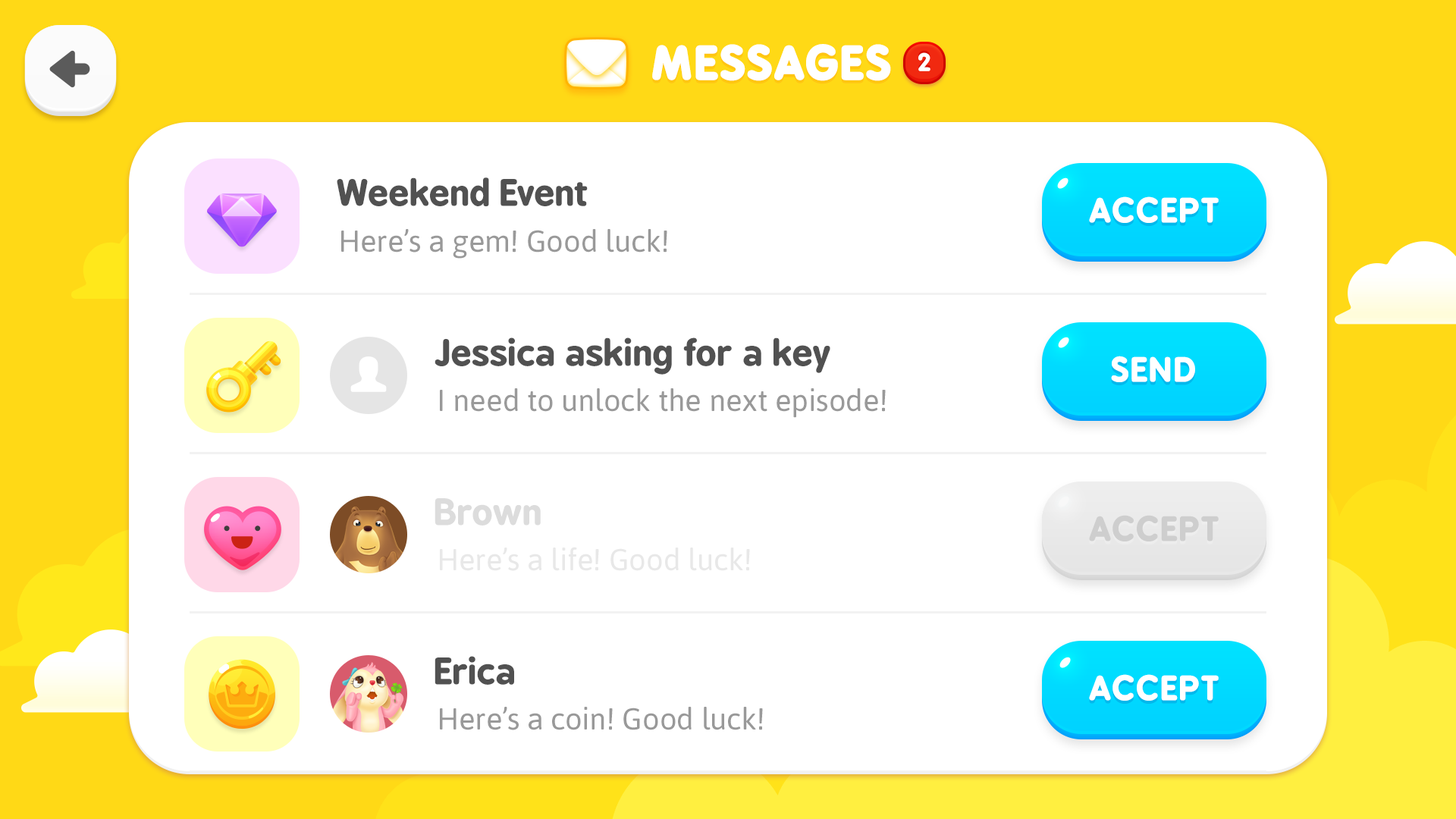
<style>
.page{position:relative;width:1456px;height:819px;background:#ffffff}
.page>*{position:absolute;margin:0}
.t1{font:43.1px "BPreplay-Bold";color:#ffffff;text-transform:uppercase;font-weight:bold;scale:1.05 1}
.t2{font:23.8px "BPreplay-Bold";letter-spacing:-0.1em;color:#ffffff;scale:1.06 1}
.t3{font:34.6px "BPreplay-Bold";letter-spacing:-0.01em;color:#515151;scale:1.05 1}
.t4{font:31.7px "BPreplay-Bold";color:#ffffff;text-transform:uppercase;font-weight:bold;scale:1.05 1}
.t5{font:30.3px "Asap-Regular";color:#999999}
.t6{font:34.6px "BPreplay-Bold";letter-spacing:-0.01em;color:#dcdcdc;scale:1.05 1}
.t7{font:31.7px "BPreplay-Bold";color:#cecece;text-transform:uppercase;font-weight:bold;scale:1.05 1}
.t8{font:30.3px "Asap-Regular";color:#e8e8e8}
</style>
<div class="page">
<p class="t1" style="left:652px;top:44px;width:239px;height:37px">Messages</p>
<p class="t2" style="left:918px;top:52px;width:12px;height:19px">2</p>
<p class="t3" style="left:337px;top:177px;width:251px;height:29px">Weekend Event</p>
<p class="t4" style="left:1089px;top:196px;width:130px;height:27px">Accept</p>
<p class="t5" style="left:341px;top:229px;width:326px;height:30px">Here’s a gem! Good luck!</p>
<p class="t3" style="left:435px;top:337px;width:395px;height:38px">Jessica asking for a key</p>
<p class="t4" style="left:1111px;top:356px;width:84px;height:26px">Send</p>
<p class="t5" style="left:440px;top:388px;width:446px;height:30px">I need to unlock the next episode!</p>
<p class="t6" style="left:435px;top:498px;width:106px;height:28px">Brown</p>
<p class="t7" style="left:1089px;top:515px;width:130px;height:26px">Accept</p>
<p class="t8" style="left:440px;top:547px;width:310px;height:24px">Here’s a life! Good luck!</p>
<p class="t3" style="left:435px;top:656px;width:79px;height:29px">Erica</p>
<p class="t4" style="left:1089px;top:674px;width:130px;height:27px">accept</p>
<p class="t5" style="left:440px;top:707px;width:323px;height:23px">Here’s a coin! Good luck!</p>
</div>
